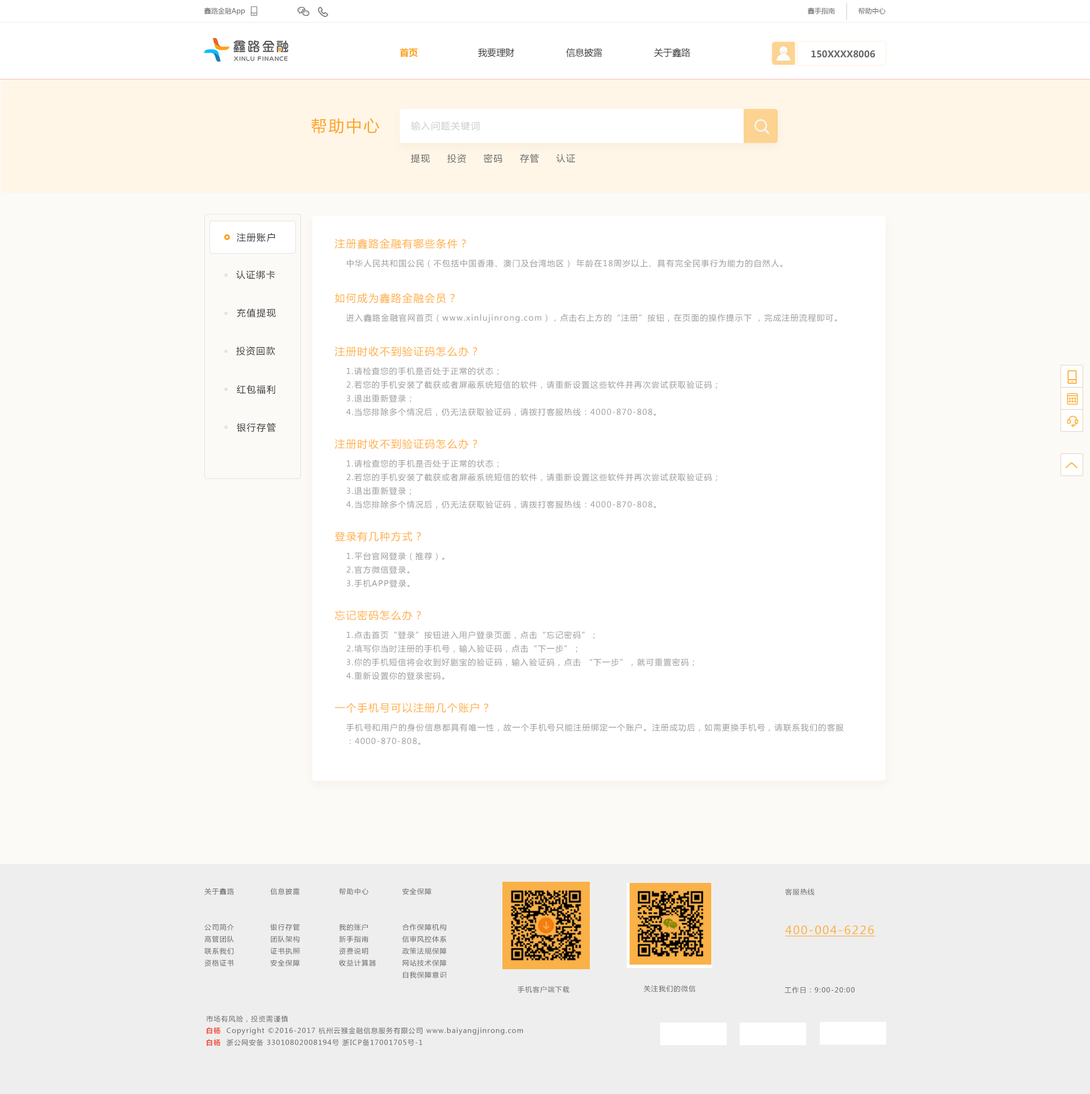
<style>
.page{position:relative;width:1090px;height:1094px;background:#fcfaf7}
.page>*{position:absolute;margin:0}
.t1{font:6.8px "MicrosoftYaHei";color:#666666}
.t2{font:9.1px "MicrosoftYaHei-Bold";color:#ffa21a}
.t3{font:9.1px "MicrosoftYaHei";color:#333333}
.t4{font:9.1px "MicrosoftYaHei-Bold";color:#666666}
.t5{font:15.9px "MicrosoftYaHei";letter-spacing:0.1em;color:#ffa21a}
.t6{font:9.1px "MicrosoftYaHei";letter-spacing:0.1em;color:#cccccc}
.t7{font:9.1px "MicrosoftYaHei";letter-spacing:0.1em;color:#666666}
.t8{font:9.1px "MicrosoftYaHei";letter-spacing:0.1em;color:#333333}
.t9{font:10.2px "MicrosoftYaHei";letter-spacing:0.1em;color:#ffaf44}
.t10{font:7.9px "MicrosoftYaHei";letter-spacing:0.1em;color:#999999}
.t11{font:7.9px/13.6px "MicrosoftYaHei";letter-spacing:0.1em;color:#999999}
.t12{font:6.8px "MicrosoftYaHei";letter-spacing:0.1em;color:#666666}
.t13{font:11.4px "MicrosoftYaHei";letter-spacing:0.1em;color:#fab147;text-decoration:underline}
.t14{font:6.8px "MicrosoftYaHei-Bold";letter-spacing:0.1em;color:#f05945}
</style>
<div class="page">
<p class="t1" style="left:204px;top:7px;width:41px;height:8px">鑫路金融App</p>
<p class="t1" style="left:807px;top:7px;width:28px;height:7px">鑫手指南</p>
<p class="t1" style="left:858px;top:7px;width:27px;height:7px">帮助中心</p>
<p class="t2" style="left:400px;top:48px;width:18px;height:9px">首页</p>
<p class="t3" style="left:478px;top:48px;width:36px;height:9px">我要理财</p>
<p class="t3" style="left:566px;top:48px;width:36px;height:9px">信息披露</p>
<p class="t3" style="left:654px;top:48px;width:36px;height:9px">关于鑫路</p>
<p class="t4" style="left:811px;top:50px;width:64px;height:8px">150XXXX8006</p>
<p class="t5" style="left:311px;top:118px;width:68px;height:16px">帮助中心</p>
<p class="t6" style="left:411px;top:121px;width:69px;height:10px">输入问题关键词</p>
<p class="t7" style="left:411px;top:154px;width:19px;height:9px">提现</p>
<p class="t7" style="left:447px;top:154px;width:19px;height:9px">投资</p>
<p class="t7" style="left:483px;top:154px;width:19px;height:9px">密码</p>
<p class="t7" style="left:520px;top:154px;width:19px;height:9px">存管</p>
<p class="t7" style="left:556px;top:154px;width:19px;height:9px">认证</p>
<p class="t8" style="left:237px;top:233px;width:38px;height:9px">注册账户</p>
<p class="t9" style="left:335px;top:238px;width:131px;height:11px">注册鑫路金融有哪些条件？</p>
<p class="t10" style="left:347px;top:259px;width:435px;height:9px">中华人民共和国公民（不包括中国香港、澳门及台湾地区） 年龄在18周岁以上、具有完全民事行为能力的自然人。</p>
<p class="t8" style="left:236px;top:270px;width:39px;height:9px">认证绑卡</p>
<p class="t9" style="left:335px;top:293px;width:120px;height:11px">如何成为鑫路金融会员？</p>
<p class="t8" style="left:237px;top:308px;width:39px;height:10px">充值提现</p>
<p class="t10" style="left:346px;top:314px;width:491px;height:9px">进入鑫路金融官网首页（www.xinlujinrong.com），点击右上方的“注册”按钮，在页面的操作提示下 ，完成注册流程即可。</p>
<p class="t8" style="left:236px;top:346px;width:39px;height:10px">投资回款</p>
<p class="t9" style="left:335px;top:346px;width:142px;height:11px">注册时收不到验证码怎么办？</p>
<p class="t11" style="left:346px;top:367px;width:371px;height:49px">1.请检查您的手机是否处于正常的状态；<br>2.若您的手机安装了截获或者屏蔽系统短信的软件，请重新设置这些软件并再次尝试获取验证码；<br>3.退出重新登录；<br>4.当您排除多个情况后，仍无法获取验证码，请拨打客服热线：4000-870-808。</p>
<p class="t8" style="left:237px;top:385px;width:38px;height:9px">红包福利</p>
<p class="t8" style="left:237px;top:423px;width:39px;height:9px">银行存管</p>
<p class="t9" style="left:335px;top:439px;width:142px;height:11px">注册时收不到验证码怎么办？</p>
<p class="t11" style="left:346px;top:460px;width:371px;height:49px">1.请检查您的手机是否处于正常的状态；<br>2.若您的手机安装了截获或者屏蔽系统短信的软件，请重新设置这些软件并再次尝试获取验证码；<br>3.退出重新登录；<br>4.当您排除多个情况后，仍无法获取验证码，请拨打客服热线：4000-870-808。</p>
<p class="t9" style="left:335px;top:531px;width:86px;height:11px">登录有几种方式？</p>
<p class="t11" style="left:346px;top:552px;width:98px;height:35px">1.平台官网登录（推荐）。<br>2.官方微信登录。<br>3.手机APP登录。</p>
<p class="t9" style="left:335px;top:610px;width:86px;height:10px">忘记密码怎么办？</p>
<p class="t11" style="left:346px;top:631px;width:348px;height:49px">1.点击首页“登录”按钮进入用户登录页面，点击“忘记密码”；<br>2.填写你当时注册的手机号，输入验证码，点击“下一步”；<br>3.你的手机短信将会收到好剧宝的验证码，输入验证码，点击 “下一步”，就可重置密码； <br>4.重新设置你的登录密码。</p>
<p class="t9" style="left:335px;top:703px;width:153px;height:10px">一个手机号可以注册几个账户？</p>
<p class="t11" style="left:346px;top:724px;width:497px;height:21px">手机号和用户的身份信息都具有唯一性，故一个手机号只能注册绑定一个账户。注册成功后，如需更换手机号，请联系我们的客服：4000-870-808。</p>
<p class="t12" style="left:204px;top:888px;width:30px;height:79px">关于鑫路<br><br><br>公司简介<br>高管团队<br>联系我们<br>资格证书</p>
<p class="t12" style="left:270px;top:888px;width:30px;height:79px">信息披露<br><br><br>银行存管<br>团队架构<br>证书执照<br>安全保障</p>
<p class="t12" style="left:339px;top:888px;width:37px;height:79px">帮助中心<br><br><br>我的账户<br>新手指南<br>资费说明<br>收益计算器</p>
<p class="t12" style="left:402px;top:888px;width:45px;height:90px">安全保障<br><br><br>合作保障机构<br>信审风控体系<br>政策法规保障<br>网站技术保障<br>自我保障意识</p>
<p class="t12" style="left:785px;top:888px;width:29px;height:8px">客服热线</p>
<p class="t13" style="left:785px;top:926px;width:90px;height:11px">400-004-6226</p>
<p class="t12" style="left:518px;top:986px;width:51px;height:7px">手机客户端下载</p>
<p class="t12" style="left:644px;top:985px;width:51px;height:8px">关注我们的微信</p>
<p class="t12" style="left:784px;top:987px;width:71px;height:7px">工作日：9:00-20:00</p>
<p class="t12" style="left:206px;top:1015px;width:82px;height:8px">市场有风险，投资需谨慎</p>
<p class="t12" style="left:207px;top:1027px;width:316px;height:20px"><span class="t14">白杨 </span> Copyright ©2016-2017 杭州云猴金融信息服务有限公司 www.baiyangjinrong.com<br><span class="t14">白杨 </span> 浙公网安备 33010802008194号 浙ICP备17001705号-1</p>
</div>
